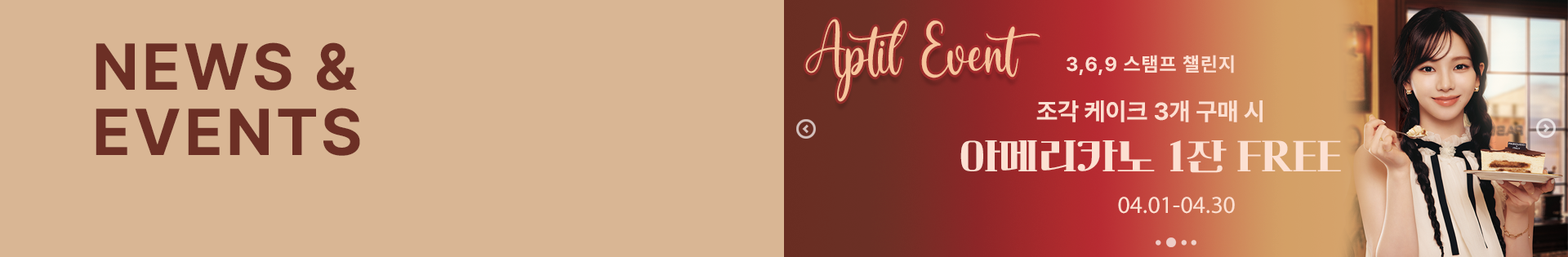
<style>
.page{position:relative;width:1568px;height:257px;background:#d9b694}
.page>*{position:absolute;margin:0}
.t1{font:65.4px/65.4px "Pretendard-Bold";letter-spacing:0.05em;color:#6c2f25}
.t2{font:24.5px/24.5px "Pretendard-Bold";color:#fce0d2}
.t3{font:19.6px/24.5px "Pretendard-Bold";letter-spacing:0.05em;color:#fce0d2}
.t4{font:39.2px/49px "Cafe24ClassicType-Regular";color:#fce0d2}
.t5{font:24.5px "MyriadPro-Regular";color:#fce0d2}
</style>
<div class="page">
<p class="t1" style="left:96px;top:42px;width:264px;height:114px">NEWS &amp;<br>EVENTS</p>
<p class="t2" style="left:960px;top:55px;width:381px;height:118px;text-align:center"><span class="t3">3,6,9 스탬프 챌린지<br><br></span>조각 케이크 3개 구매 시<br><span class="t4">아메리카노 1잔 FREE</span></p>
<p class="t5" style="left:1118px;top:197px;width:117px;height:17px">04.01-04.30</p>
</div>
